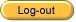
<style>
.page{position:relative;width:76px;height:22px;background:#fec244}
.page>*{position:absolute;margin:0}
.t1{font:11px "ArialMT";color:#030366}
</style>
<div class="page">
<p class="t1" style="left:18px;top:6px;width:37px;height:11px">Log-out</p>
</div>
